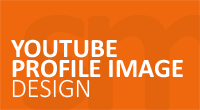
<style>
.page{position:relative;width:200px;height:110px;background:#f0680e}
.page>*{position:absolute;margin:0}
.t1{font:26.6px/20.8px "Calibri-Bold";color:#ffffff}
.t2{font:26.6px "Calibri-Light";color:#ffffff}
</style>
<div class="page">
<p class="t1" style="left:11px;top:39px;width:172px;height:39px">YOUTUBE<br>PROFILE IMAGE</p>
<p class="t2" style="left:12px;top:79px;width:78px;height:19px">DESIGN</p>
</div>
